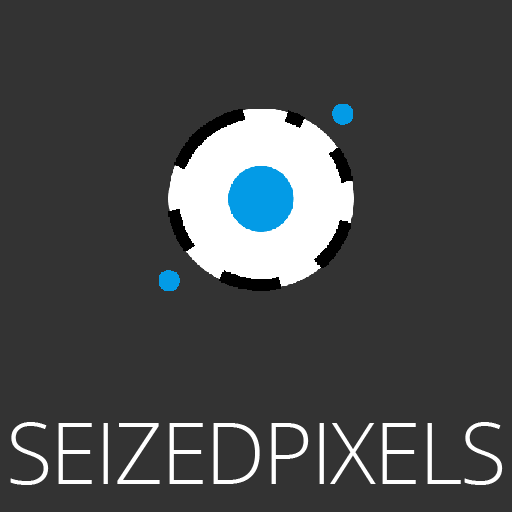
<style>
.page{position:relative;width:512px;height:512px;background:#333333}
.page>*{position:absolute;margin:0}
.t1{font:85px "OpenSans-Light";letter-spacing:-0.025em;color:#ffffff}
</style>
<div class="page">
<p class="t1" style="left:10px;top:422px;width:493px;height:63px">SEIZEDPIXELS</p>
</div>
